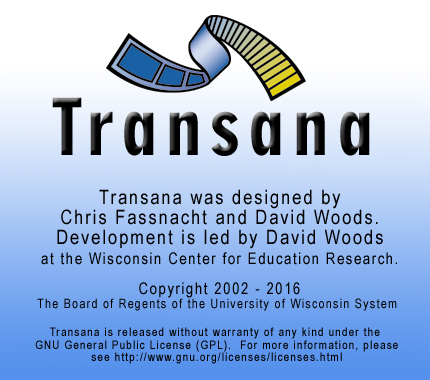
<style>
.page{position:relative;width:430px;height:380px}
.page>*{position:absolute;margin:0}
.t1{font:75px "Geometric706BT-BlackCondensedB";letter-spacing:0.1em;color:#000000}
.t2{font:20px/20px "ArialNarrow";letter-spacing:0.1em;color:#000000}
.t3{font:16px/20px "ArialNarrow";letter-spacing:0.1em;color:#000000}
.t4{font:13px/13.8px "ArialNarrow";letter-spacing:0.1em;color:#000000}
.t5{font:15px/13.8px "ArialNarrow";letter-spacing:0.1em;color:#000000}
.t6{font:16px/13.8px "ArialNarrow";letter-spacing:0.1em;color:#000000}
.t7{font:12px/12.5px "ArialNarrow";letter-spacing:0.1em;color:#000000}
</style>
<div class="page">
<p class="t1" style="left:52px;top:97px;width:318px;height:59px">Transana</p>
<p class="t2" style="left:41px;top:189px;width:356px;height:76px;text-align:center">Transana was designed by<br>Chris Fassnacht and David Woods.<br>Development is led by David Woods<br><span class="t3">at the Wisconsin Center for Education Research.</span></p>
<p class="t4" style="left:37px;top:282px;width:360px;height:29px;text-align:center"><span class="t5"> </span><span class="t6">Copyright 2002 - 2016<br></span>The Board of Regents of the University of Wisconsin System</p>
<p class="t7" style="left:35px;top:327px;width:363px;height:37px;text-align:center">Transana is released without warranty of any kind under the <br>GNU General Public License (GPL).  For more information, please<br>see http://www.gnu.org/licenses/licenses.html</p>
</div>
